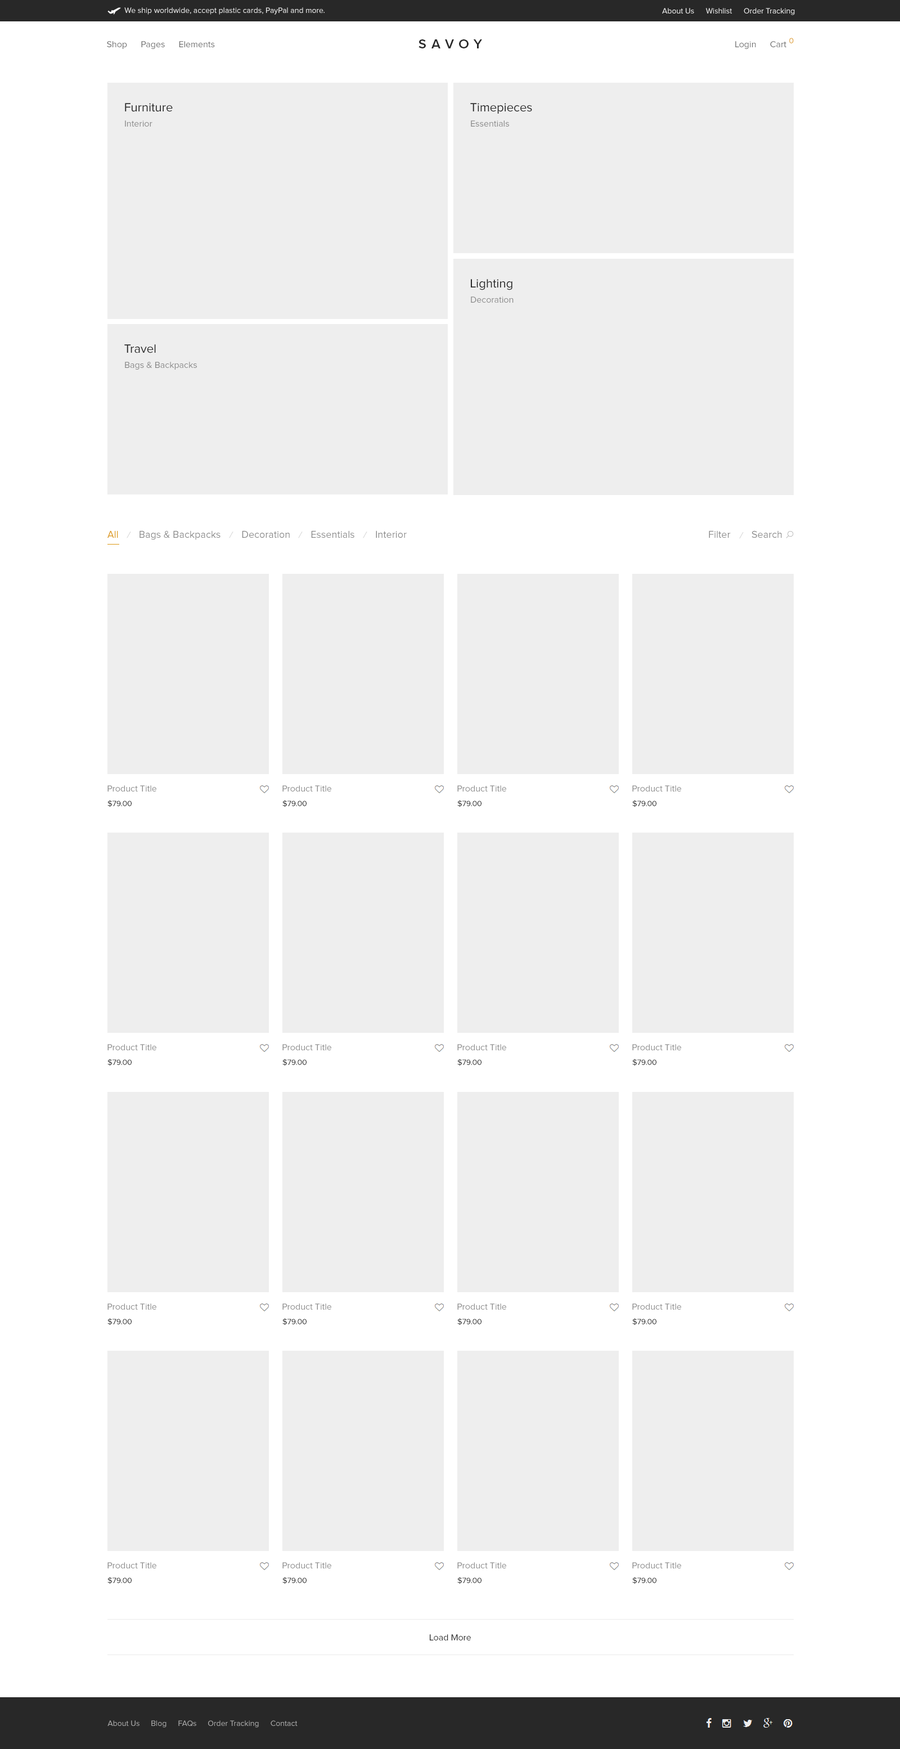
<style>
.page{position:relative;width:900px;height:1749px;background:#eeeeee}
.page>*{position:absolute;margin:0}
.t1{font:7.9px "ProximaNova-Regular";color:#eeeeee}
.t2{font:9px "ProximaNova-Regular";color:#707070}
.t3{font:13.5px "ProximaNova-Semibold";letter-spacing:0.37em;color:#282828;text-transform:uppercase}
.t4{font:7.9px "ProximaNova-Regular";color:#dc9814}
.t5{font:12.4px "ProximaNova-Regular";color:#282828}
.t6{font:9px "ProximaNova-Regular";color:#888888}
.t7{font:10.1px "ProximaNova-Regular";color:#dc9814}
.t8{font:9px "ProximaNova-RegularIt";color:#cccccc}
.t9{font:10.1px "ProximaNova-Regular";color:#888888}
.t10{font:9px "ProximaNova-Regular";color:#8c8c8c}
.t11{font:7.9px "ProximaNova-Regular";color:#181818}
.t12{font:9px "ProximaNova-Regular";color:#282828}
.t13{font:7.9px "ProximaNova-Regular";color:#aaaaaa}
</style>
<div class="page">
<p class="t1" style="left:124px;top:7px;width:201px;height:8px">We ship worldwide, accept plastic cards, PayPal and more.</p>
<p class="t1" style="left:662px;top:8px;width:32px;height:6px">About Us</p>
<p class="t1" style="left:706px;top:8px;width:26px;height:6px">Wishlist</p>
<p class="t1" style="left:744px;top:8px;width:51px;height:7px">Order Tracking</p>
<p class="t2" style="left:107px;top:41px;width:20px;height:8px">Shop</p>
<p class="t2" style="left:141px;top:41px;width:24px;height:8px">Pages</p>
<p class="t2" style="left:179px;top:41px;width:36px;height:6px">Elements</p>
<p class="t3" style="left:418px;top:39px;width:64px;height:9px">savoy</p>
<p class="t2" style="left:735px;top:41px;width:21px;height:8px">Login</p>
<p class="t2" style="left:770px;top:41px;width:16px;height:6px">Cart</p>
<p class="t4" style="left:789px;top:38px;width:5px;height:5px">0</p>
<p class="t5" style="left:125px;top:103px;width:48px;height:9px">Furniture</p>
<p class="t5" style="left:470px;top:103px;width:62px;height:11px">Timepieces</p>
<p class="t6" style="left:125px;top:120px;width:27px;height:7px">Interior</p>
<p class="t6" style="left:471px;top:120px;width:38px;height:7px">Essentials</p>
<p class="t5" style="left:471px;top:279px;width:41px;height:11px">Lighting</p>
<p class="t6" style="left:471px;top:296px;width:43px;height:7px">Decoration</p>
<p class="t5" style="left:124px;top:344px;width:32px;height:9px">Travel</p>
<p class="t6" style="left:125px;top:362px;width:72px;height:8px">Bags &amp; Backpacks</p>
<p class="t7" style="left:107px;top:530px;width:11px;height:8px">All</p>
<p class="t8" style="left:127px;top:532px;width:4px;height:6px">/</p>
<p class="t9" style="left:140px;top:530px;width:80px;height:10px">Bags &amp; Backpacks</p>
<p class="t8" style="left:229px;top:532px;width:4px;height:6px">/</p>
<p class="t9" style="left:242px;top:530px;width:48px;height:8px">Decoration</p>
<p class="t8" style="left:298px;top:532px;width:5px;height:6px">/</p>
<p class="t9" style="left:311px;top:530px;width:43px;height:8px">Essentials</p>
<p class="t8" style="left:363px;top:532px;width:4px;height:6px">/</p>
<p class="t9" style="left:376px;top:530px;width:31px;height:8px">Interior</p>
<p class="t9" style="left:709px;top:530px;width:22px;height:8px">Filter</p>
<p class="t8" style="left:739px;top:532px;width:5px;height:7px">/</p>
<p class="t9" style="left:752px;top:530px;width:30px;height:8px">Search</p>
<p class="t10" style="left:107px;top:785px;width:49px;height:6px">Product Title</p>
<p class="t10" style="left:282px;top:785px;width:49px;height:6px">Product Title</p>
<p class="t10" style="left:457px;top:785px;width:49px;height:6px">Product Title</p>
<p class="t10" style="left:632px;top:785px;width:49px;height:6px">Product Title</p>
<p class="t11" style="left:107px;top:800px;width:25px;height:7px">$79.00</p>
<p class="t11" style="left:282px;top:800px;width:25px;height:7px">$79.00</p>
<p class="t11" style="left:457px;top:800px;width:25px;height:7px">$79.00</p>
<p class="t11" style="left:632px;top:800px;width:24px;height:7px">$79.00</p>
<p class="t10" style="left:107px;top:1044px;width:49px;height:6px">Product Title</p>
<p class="t10" style="left:282px;top:1044px;width:49px;height:6px">Product Title</p>
<p class="t10" style="left:457px;top:1044px;width:49px;height:6px">Product Title</p>
<p class="t10" style="left:632px;top:1044px;width:49px;height:6px">Product Title</p>
<p class="t11" style="left:107px;top:1059px;width:25px;height:7px">$79.00</p>
<p class="t11" style="left:282px;top:1059px;width:25px;height:7px">$79.00</p>
<p class="t11" style="left:457px;top:1059px;width:25px;height:7px">$79.00</p>
<p class="t11" style="left:632px;top:1059px;width:24px;height:7px">$79.00</p>
<p class="t10" style="left:107px;top:1303px;width:49px;height:7px">Product Title</p>
<p class="t10" style="left:282px;top:1303px;width:49px;height:7px">Product Title</p>
<p class="t10" style="left:457px;top:1303px;width:49px;height:7px">Product Title</p>
<p class="t10" style="left:632px;top:1303px;width:49px;height:7px">Product Title</p>
<p class="t11" style="left:107px;top:1318px;width:25px;height:7px">$79.00</p>
<p class="t11" style="left:282px;top:1318px;width:25px;height:7px">$79.00</p>
<p class="t11" style="left:457px;top:1318px;width:25px;height:7px">$79.00</p>
<p class="t11" style="left:632px;top:1318px;width:24px;height:7px">$79.00</p>
<p class="t10" style="left:107px;top:1562px;width:49px;height:6px">Product Title</p>
<p class="t10" style="left:282px;top:1562px;width:49px;height:6px">Product Title</p>
<p class="t10" style="left:457px;top:1562px;width:49px;height:6px">Product Title</p>
<p class="t10" style="left:632px;top:1562px;width:49px;height:6px">Product Title</p>
<p class="t11" style="left:107px;top:1577px;width:25px;height:7px">$79.00</p>
<p class="t11" style="left:282px;top:1577px;width:25px;height:7px">$79.00</p>
<p class="t11" style="left:457px;top:1577px;width:25px;height:7px">$79.00</p>
<p class="t11" style="left:632px;top:1577px;width:24px;height:7px">$79.00</p>
<p class="t12" style="left:430px;top:1634px;width:41px;height:6px">Load More</p>
<p class="t13" style="left:107px;top:1720px;width:33px;height:6px">About Us</p>
<p class="t13" style="left:151px;top:1720px;width:15px;height:7px">Blog</p>
<p class="t13" style="left:178px;top:1720px;width:18px;height:6px">FAQs</p>
<p class="t13" style="left:208px;top:1720px;width:51px;height:7px">Order Tracking</p>
<p class="t13" style="left:271px;top:1720px;width:27px;height:6px">Contact</p>
</div>
